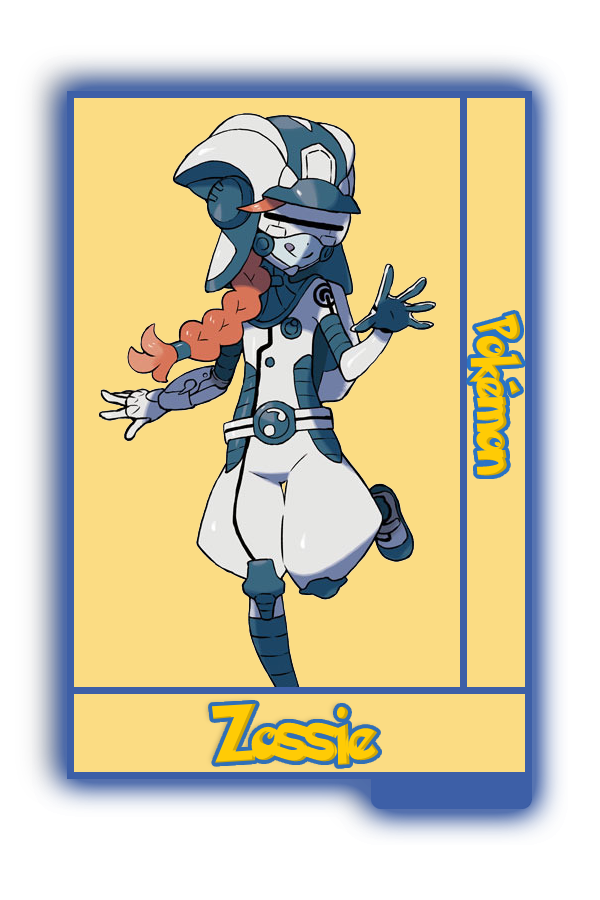
<style>
.page{position:relative;width:600px;height:900px;background:#fbdc83}
.page>*{position:absolute;margin:0}
.t1{font:48.8px "PokemonSolidNormal";color:#ffcb05;scale:0.8 1}
.t2{font:56.6px "PokemonSolidNormal";color:#ffcb05;scale:0.92 1}
</style>
<div class="page">
<p class="t1" style="left:469px;top:313px;width:54px;height:163px;rotate:90deg">Pokémon</p>
<p class="t2" style="left:211px;top:703px;width:168px;height:62px">Zossie</p>
</div>
